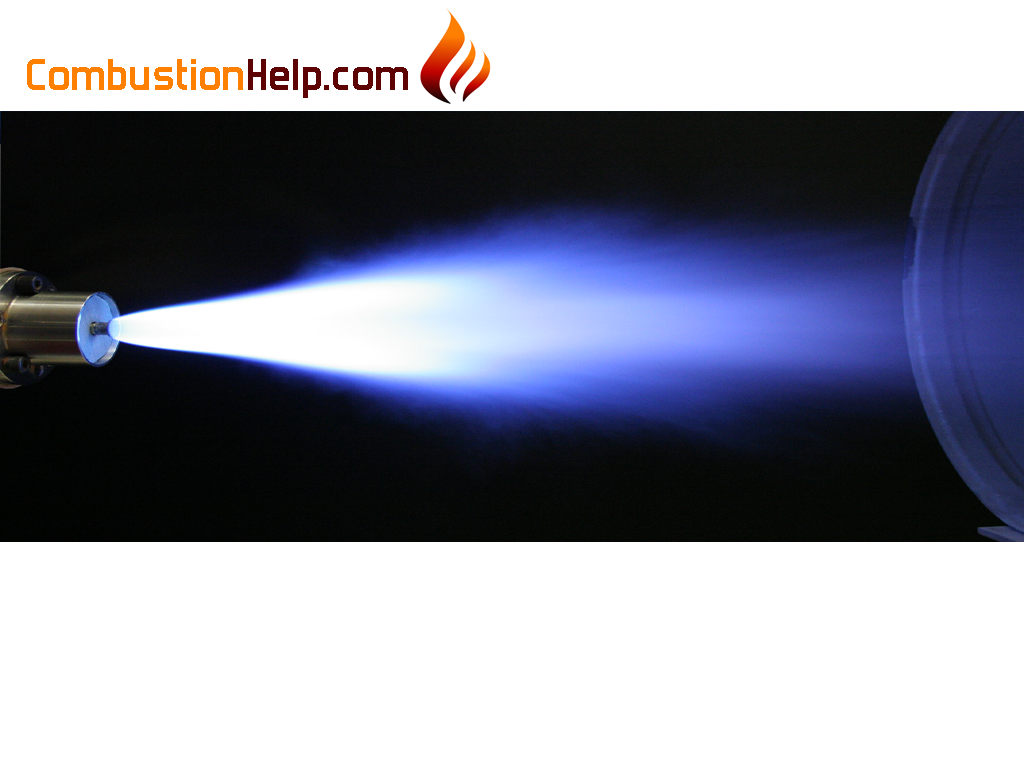
<style>
.page{position:relative;width:1024px;height:768px;background:#ffffff}
.page>*{position:absolute;margin:0}
.t1{font:48.6px "ForgottenFuturist-Bold";color:#ff8001}
.t2{font:48.6px "ForgottenFuturist-Bold";color:#5d0303}
</style>
<div class="page">
<p class="t1" style="left:27px;top:59px;width:381px;height:39px">Combustion<span class="t2">Help.com</span></p>
</div>
